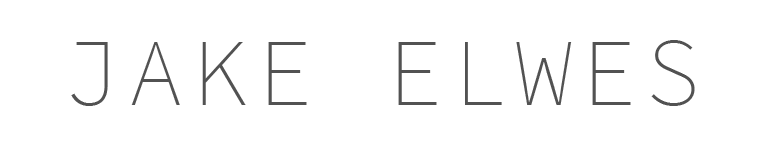
<style>
.page{position:relative;width:764px;height:157px;background:#ffffff}
.page>*{position:absolute;margin:0}
.t1{font:95.9px "SourceCodePro-ExtraLight";letter-spacing:0.075em;color:#525252}
</style>
<div class="page">
<p class="t1" style="left:71px;top:40px;width:624px;height:66px">JAKE ELWES</p>
</div>
